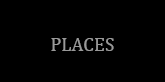
<style>
.page{position:relative;width:165px;height:82px;background:#000000}
.page>*{position:absolute;margin:0}
.t1{font:19.1px "Cambria";color:#999999}
</style>
<div class="page">
<p class="t1" style="left:51px;top:38px;width:63px;height:13px">PLACES</p>
</div>
